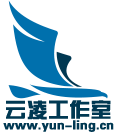
<style>
.page{position:relative;width:115px;height:133px;background:#ffffff}
.page>*{position:absolute;margin:0}
.t1{font:20.8px "FZZYJW--GB1-0";color:#003852;font-weight:bold}
.t2{font:12.5px "FZZYJW--GB1-0";color:#003852;font-weight:bold}
</style>
<div class="page">
<p class="t1" style="left:6px;top:100px;width:105px;height:20px">云凌工作室</p>
<p class="t2" style="left:3px;top:120px;width:111px;height:12px">www.yun-ling.cn</p>
</div>
